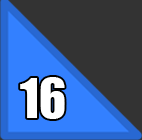
<style>
.page{position:relative;width:142px;height:140px;background:#333333}
.page>*{position:absolute;margin:0}
.t1{font:50px "Impact";color:#ffffff}
</style>
<div class="page">
<p class="t1" style="left:20px;top:77px;width:45px;height:42px">16</p>
</div>
